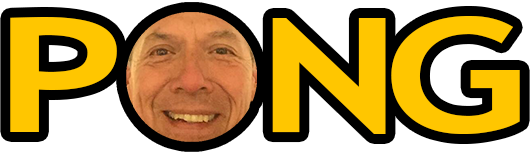
<style>
.page{position:relative;width:530px;height:154px;background:#ffffff}
.page>*{position:absolute;margin:0}
.t1{font:160px "TrebuchetMS-Bold";letter-spacing:-0.08em;color:#ffc600;scale:1.35 1}
.t2{font:160px "TrebuchetMS-Bold";color:#ffc600;scale:1.4 1}
</style>
<div class="page">
<p class="t1" style="left:10px;top:16px;width:510px;height:118px"><span class="t2">P  </span>NG</p>
</div>
